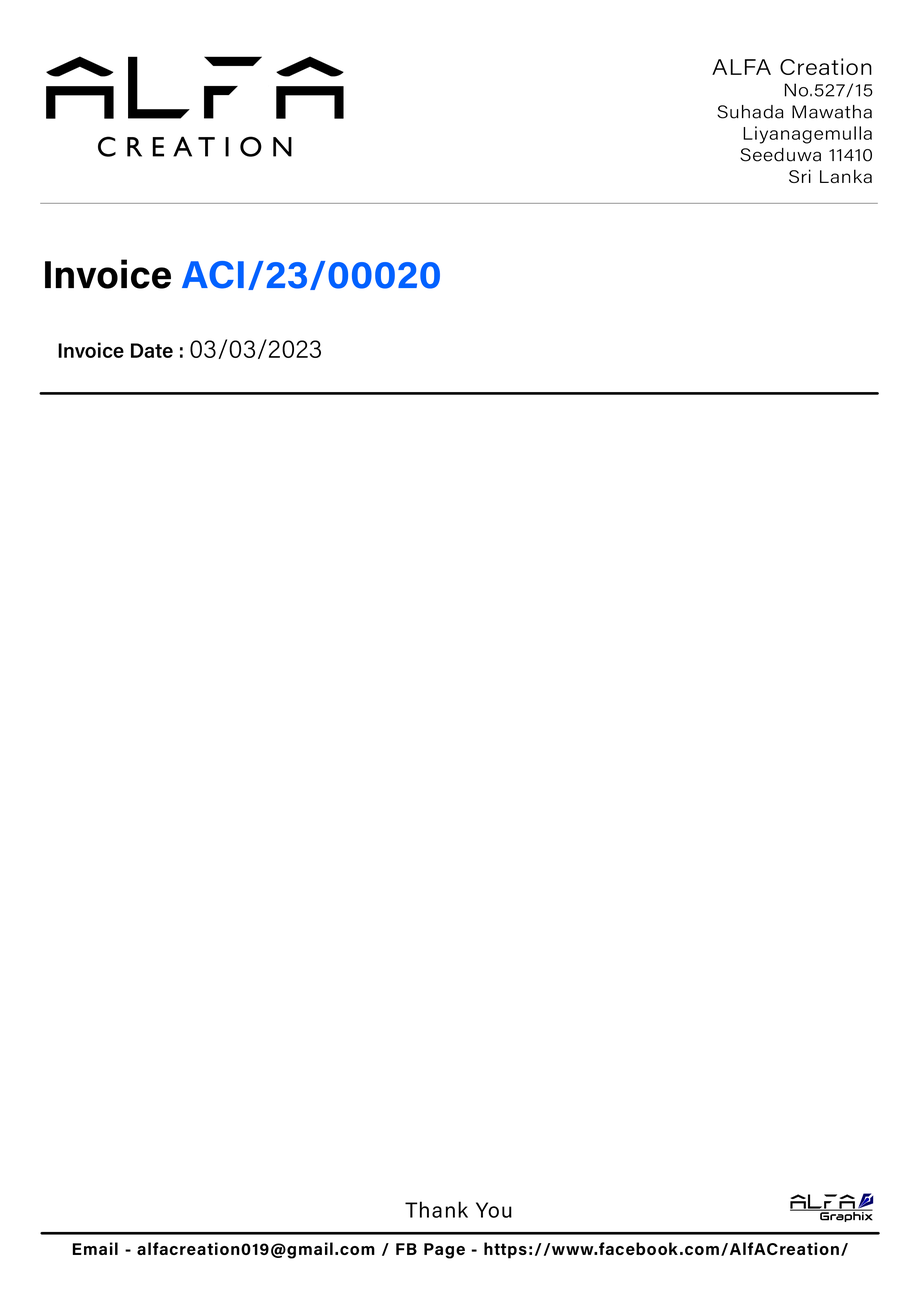
<style>
.page{position:relative;width:918px;height:1299px;background:#ffffff}
.page>*{position:absolute;margin:0}
.t1{font:18px/21.6px "AcuminConcept-Light";letter-spacing:0.025em;color:#000000;font-weight:bold;scale:1.11 1}
.t2{font:22.2px/21.6px "AcuminConcept-Light";letter-spacing:0.025em;color:#000000;font-weight:bold;scale:1.11 1}
.t3{font:39px "AcuminConcept-Bold";color:#0062ff;font-weight:bold}
.t4{font:39px "AcuminConcept-Bold";color:#000000;font-weight:bold}
.t5{font:20.6px "AcuminConcept-Semibold";color:#000000;font-weight:bold}
.t6{font:25.8px "AcuminConcept-Light";color:#000000;font-weight:bold}
.t7{font:21.6px "AcuminConcept-Regular";letter-spacing:0.05em;color:#000000;font-weight:bold}
.t8{font:17px "AcuminConcept-Bold";letter-spacing:0.05em;color:#000000;font-weight:bold}
</style>
<div class="page">
<p class="t1" style="left:712px;top:58px;width:161px;height:125px;text-align:right"><span class="t2">ALFA Creation<br></span>No.527/15<br>Suhada Mawatha<br>Liyanagemulla<br>Seeduwa 11410<br>Sri Lanka</p>
<p class="t3" style="left:45px;top:260px;width:395px;height:30px"><span class="t4">Invoice </span>ACI/23/00020</p>
<p class="t5" style="left:58px;top:339px;width:263px;height:20px">Invoice Date : <span class="t6">03/03/2023</span></p>
<p class="t7" style="left:405px;top:1201px;width:107px;height:17px">Thank You</p>
<p class="t8" style="left:73px;top:1242px;width:775px;height:16px">Email - alfacreation019@gmail.com / FB Page - https://www.facebook.com/AlfACreation/</p>
</div>
